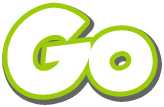
<style>
.page{position:relative;width:164px;height:107px;background:#ffffff}
.page>*{position:absolute;margin:0}
.t1{font:100px "GROBOLD";color:#ffffff}
</style>
<div class="page">
<p class="t1" style="left:7px;top:7px;width:146px;height:88px">Go</p>
</div>
